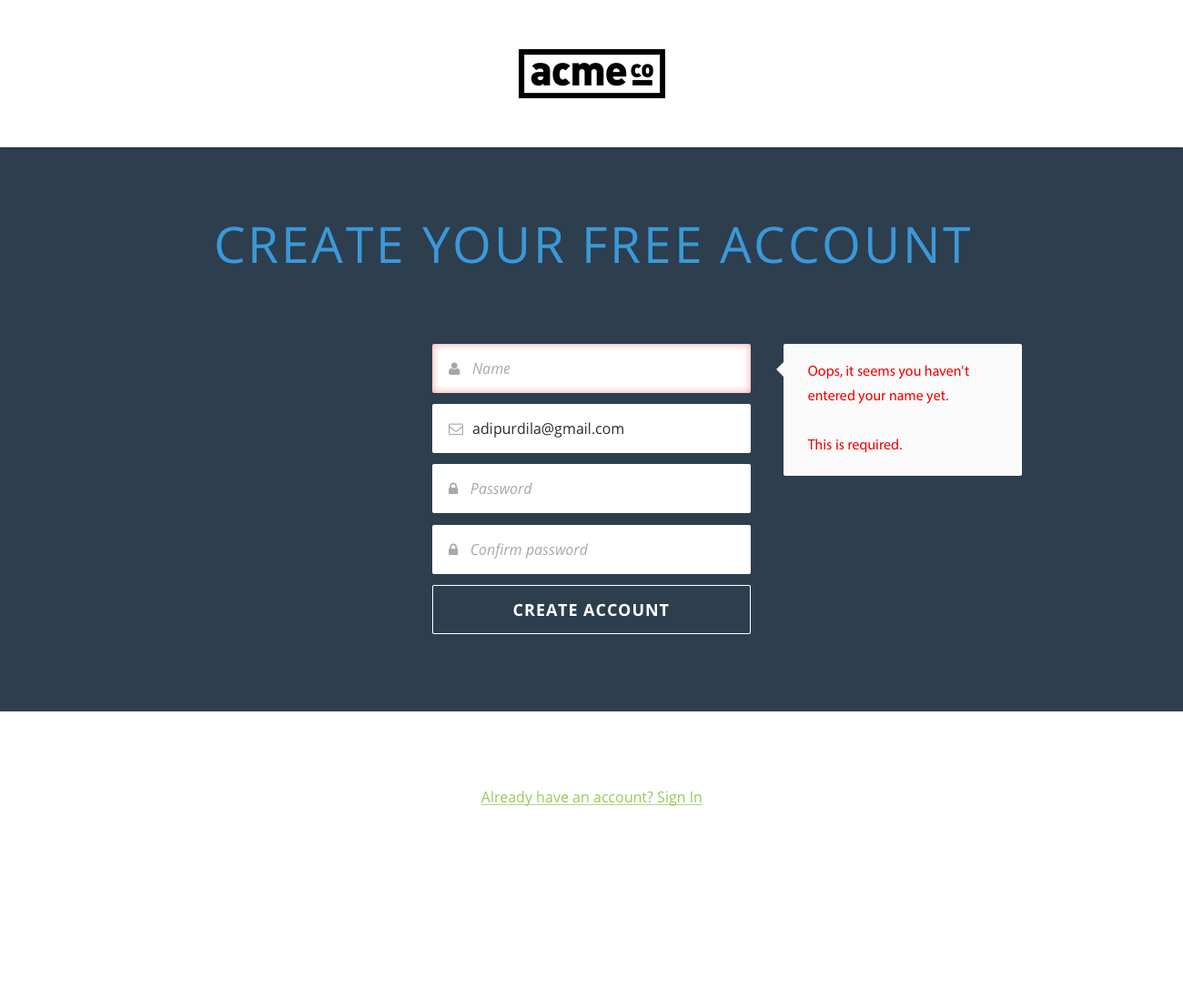
<style>
.page{position:relative;width:1183px;height:1008px;background:#ffffff}
.page>*{position:absolute;margin:0}
.t1{font:50px "OpenSans";letter-spacing:0.05em;color:#3a99d8;text-transform:uppercase}
.t2{font:14.6px/24.6px "MyriadPro-Regular";color:#f30000}
.t3{font:16.4px "OpenSans-Bold";letter-spacing:0.05em;color:#ffffff;text-transform:uppercase}
.t4{font:14.6px "OpenSans";color:#9ac75b;text-decoration:underline}
</style>
<div class="page">
<p class="t1" style="left:217px;top:227px;width:753px;height:37px">Create your free account</p>
<p class="t2" style="left:807px;top:365px;width:162px;height:88px">Oops, it seems you haven't entered your name yet.<br><br>This is required.</p>
<p class="t3" style="left:513px;top:603px;width:156px;height:14px">Create account</p>
<p class="t4" style="left:480px;top:791px;width:223px;height:15px">Already have an account? Sign In</p>
</div>
